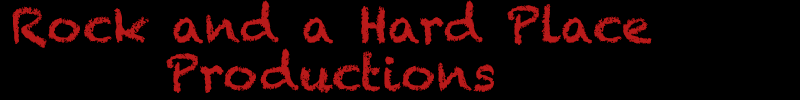
<style>
.page{position:relative;width:800px;height:100px;background:#000000}
.page>*{position:absolute;margin:0}
.t1{font:48px/48px "Chalkduster";color:#b91a1a}
</style>
<div class="page">
<p class="t1" style="left:12px;top:0px;width:640px;height:93px;text-align:center">Rock and a Hard Place<br>Productions</p>
</div>
